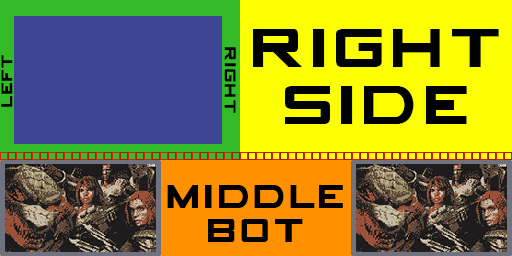
<style>
.page{position:relative;width:512px;height:256px;background:#fcff00}
.page>*{position:absolute;margin:0}
.t1{font:47.9px "GAMECUBENDualSet";letter-spacing:0.02em;color:#000000}
.t2{font:13.6px "GAMECUBENDualSet";letter-spacing:0.02em;color:#000000;scale:0.94 1}
.t3{font:28.1px "GAMECUBENDualSet";letter-spacing:0.02em;color:#000000}
</style>
<div class="page">
<p class="t1" style="left:253px;top:29px;width:246px;height:95px;text-align:center">RIGHT<br>SIDE</p>
<p class="t2" style="left:224px;top:47px;width:12px;height:66px;rotate:90deg">RIGHT</p>
<p class="t2" style="left:1px;top:55px;width:12px;height:52px;rotate:-90deg">LEFT</p>
<p class="t3" style="left:167px;top:185px;width:176px;height:57px;text-align:center">MIDDLE<br>BOT</p>
</div>
